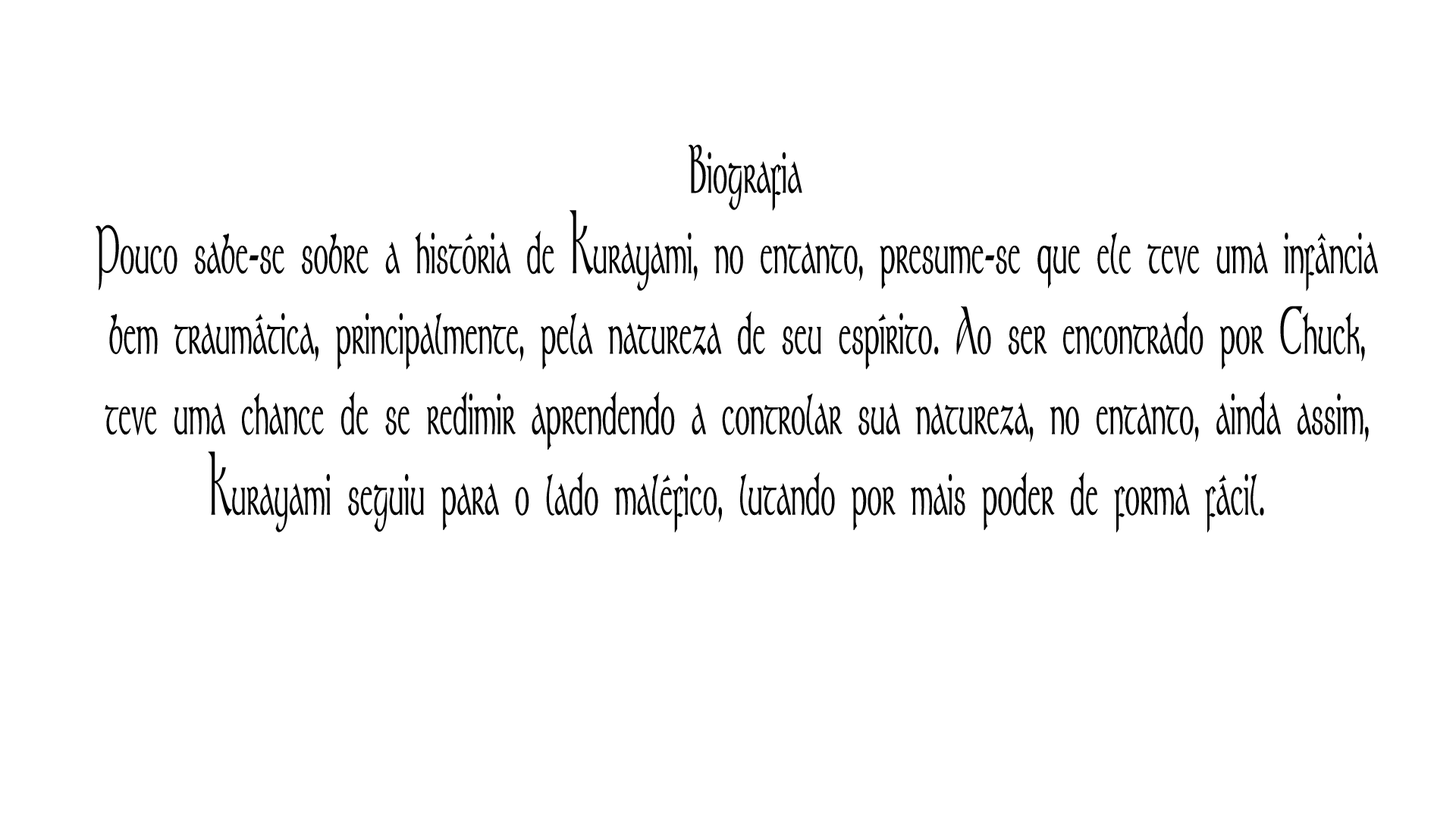
<style>
.page{position:relative;width:1456px;height:819px;background:#ffffff}
.page>*{position:absolute;margin:0}
.t1{font:67.1px "Stonehenge";color:#030303;font-weight:bold;scale:0.45 1}
</style>
<div class="page">
<p class="t1" style="left:96px;top:144px;width:1282px;height:388px;text-align:center">Biografia<br>Pouco sabe-se sobre a história de Kurayami, no entanto, presume-se que ele teve uma infância <br>bem traumática, principalmente, pela natureza de seu espírito. Ao ser encontrado por Chuck, <br>teve uma chance de se redimir aprendendo a controlar sua natureza, no entanto, ainda assim, <br>Kurayami seguiu para o lado maléfico, lutando por mais poder de forma fácil.</p>
</div>
